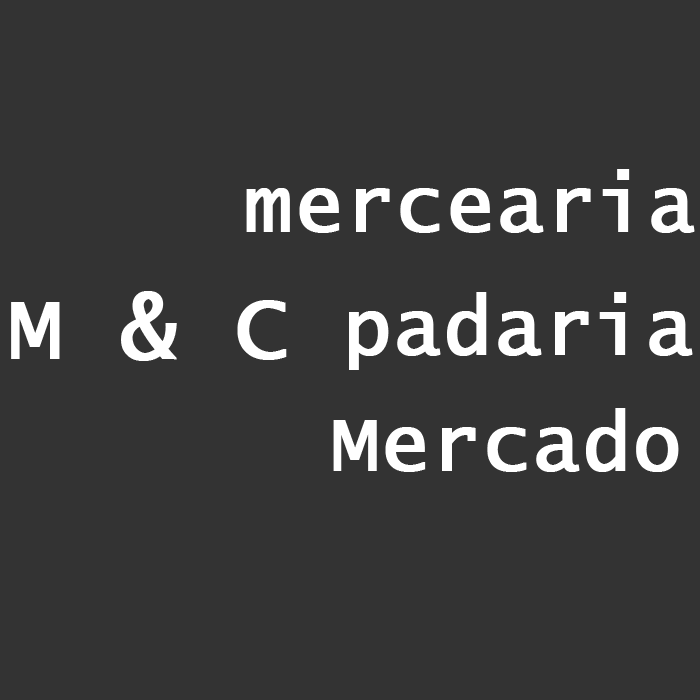
<style>
.page{position:relative;width:700px;height:700px;background:#333333}
.page>*{position:absolute;margin:0}
.t1{font:80px "LucidaConsole";color:#ffffff;font-weight:bold}
.t2{font:90px "LucidaConsole";color:#ffffff;font-weight:bold}
</style>
<div class="page">
<p class="t1" style="left:246px;top:169px;width:449px;height:64px">mercearia</p>
<p class="t2" style="left:11px;top:291px;width:276px;height:70px">M &amp; C</p>
<p class="t1" style="left:349px;top:292px;width:344px;height:78px">padaria</p>
<p class="t1" style="left:333px;top:408px;width:346px;height:64px">Mercado</p>
</div>
